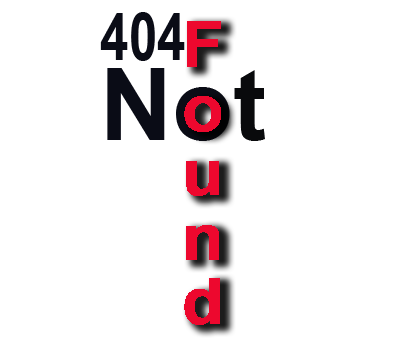
<style>
.page{position:relative;width:420px;height:347px;background:#ffffff}
.page>*{position:absolute;margin:0}
.t1{font:66.4px "Arial-BoldMT";color:#0a0c16;scale:0.77 1}
.t2{font:100px "Arial-BoldMT";color:#0a0c16}
.t3{font:100px "Arial-BoldMT";color:#090a0c}
</style>
<div class="page">
<p class="t1" style="left:100px;top:12px;width:85px;height:49px">404</p>
<p class="t2" style="left:107px;top:68px;width:158px;height:73px">No<span class="t3">t</span></p>
</div>
